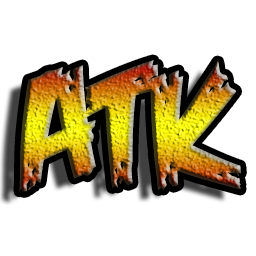
<style>
.page{position:relative;width:256px;height:256px;background:#ffffff}
.page>*{position:absolute;margin:0}
.t1{font:171.2px "FeastofFleshBB"}
</style>
<div class="page">
<p class="t1" style="left:19px;top:60px;width:222px;height:132px">ATK</p>
</div>
